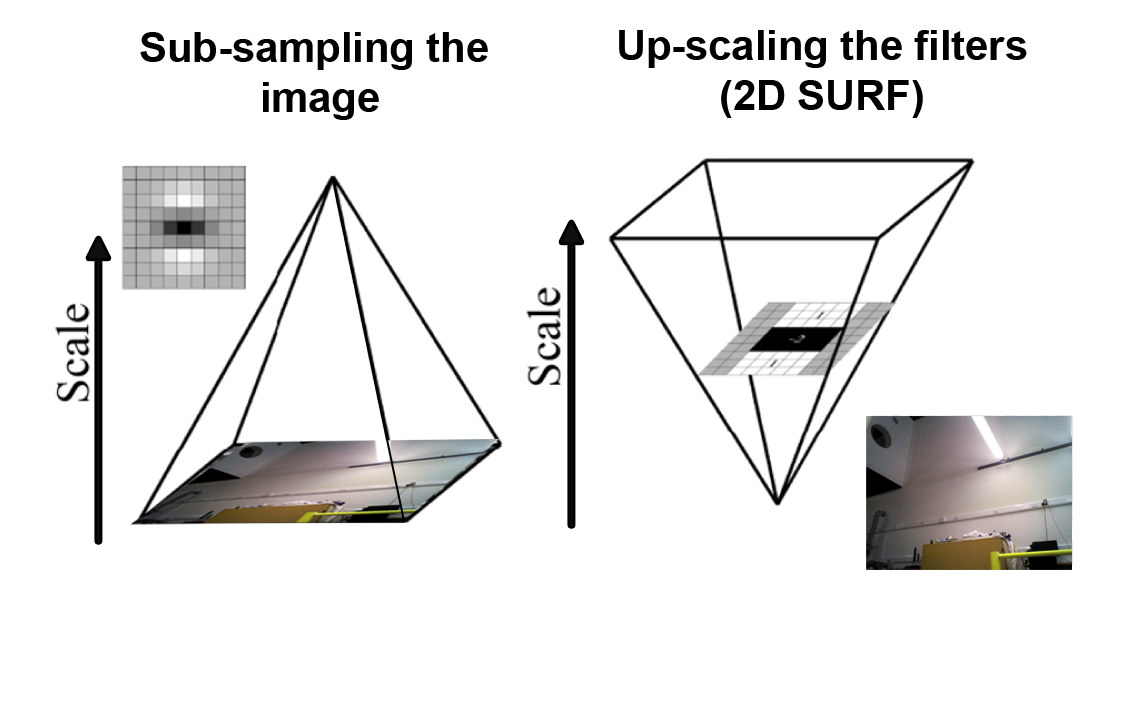
<style>
.page{position:relative;width:1129px;height:709px;background:#ffffff}
.page>*{position:absolute;margin:0}
.t1{font:41.7px "Arial-BoldMT";color:#000000}
</style>
<div class="page">
<p class="t1" style="left:619px;top:30px;width:408px;height:88px;text-align:center">Up-scaling the filters<br>(2D SURF)</p>
<p class="t1" style="left:140px;top:32px;width:348px;height:88px;text-align:center">Sub-sampling the <br>image</p>
</div>
